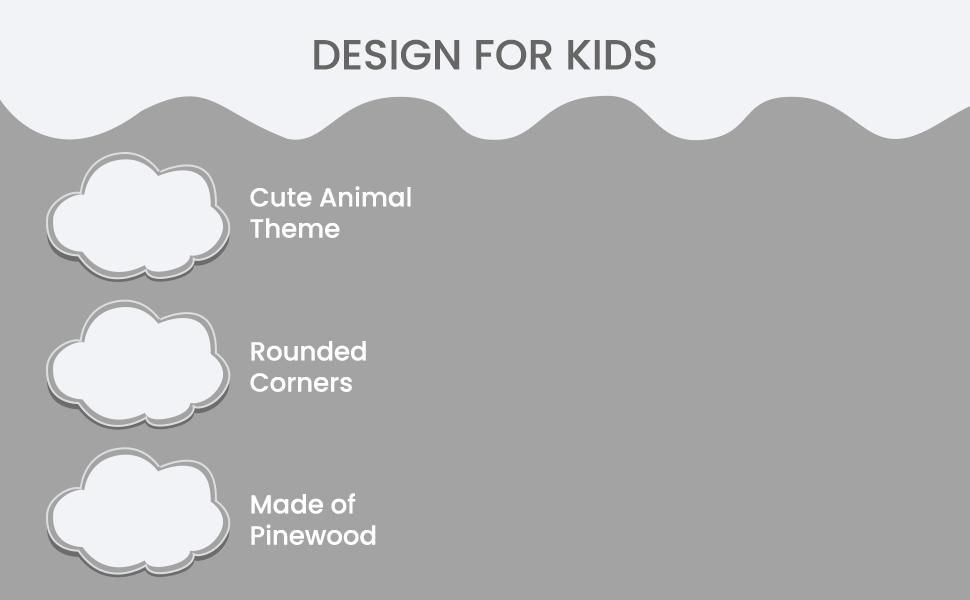
<style>
.page{position:relative;width:970px;height:600px;background:#a3a3a3}
.page>*{position:absolute;margin:0}
.t1{font:42px "Poppins-Medium";color:#666666}
.t2{font:26px "Poppins-Medium";color:#ffffff}
</style>
<div class="page">
<p class="t1" style="left:314px;top:39px;width:342px;height:31px">DESIGN FOR KIDS</p>
<p class="t2" style="left:250px;top:186px;width:161px;height:52px">Cute Animal<br>Theme</p>
<p class="t2" style="left:250px;top:341px;width:116px;height:51px">Rounded <br>Corners</p>
<p class="t2" style="left:251px;top:493px;width:125px;height:52px">Made of<br>Pinewood</p>
</div>
